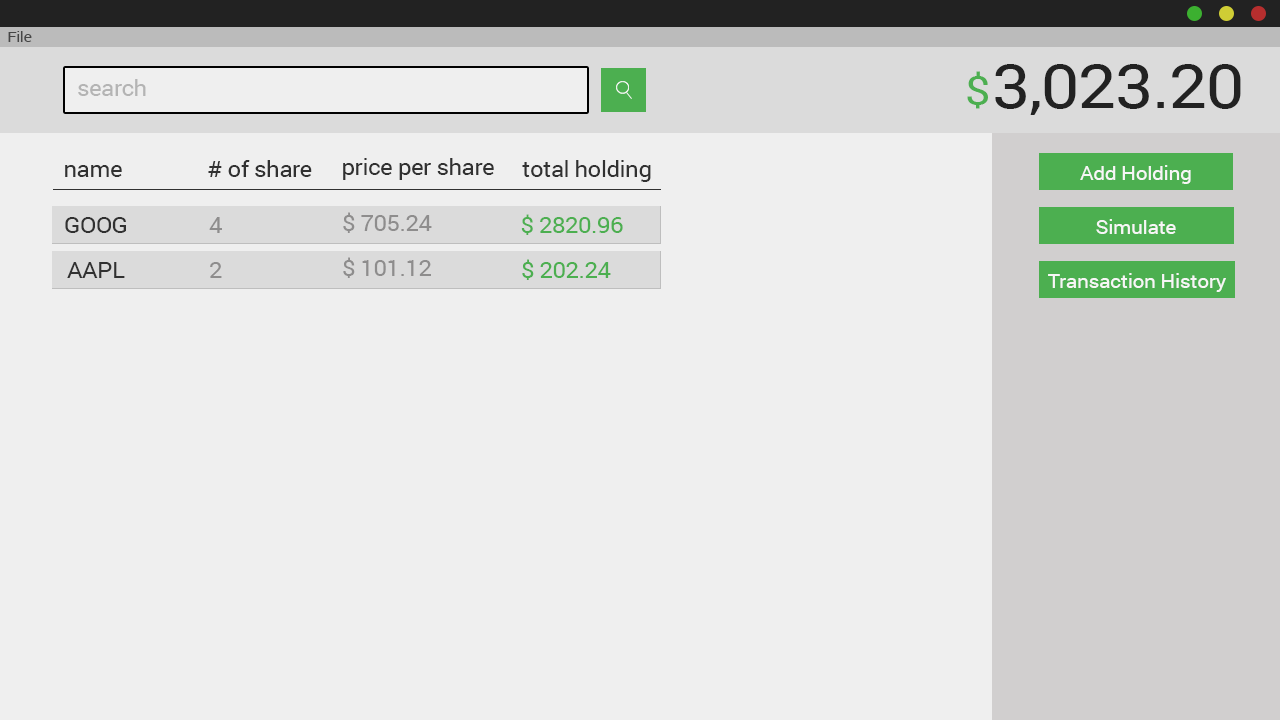
<style>
.page{position:relative;width:1280px;height:720px;background:#efefef}
.page>*{position:absolute;margin:0}
.t1{font:14.1px "Roboto-Regular";letter-spacing:-0.02em;color:#454545;scale:1.11 1}
.t2{font:61.4px "Roboto-Regular";letter-spacing:-0.02em;color:#222222;scale:1.11 1}
.t3{font:40.3px "Roboto-Regular";letter-spacing:-0.02em;color:#4caf50;scale:1.11 1}
.t4{font:21.6px "Roboto-Regular";letter-spacing:-0.02em;color:#b4b4b4;scale:1.11 1}
.t5{font:21.6px "Roboto-Regular";letter-spacing:-0.02em;color:#313131;scale:1.11 1}
.t6{font:18.9px "Roboto-Regular";letter-spacing:-0.02em;color:#f7f6f6;scale:1.11 1}
.t7{font:21.6px "Roboto-Regular";letter-spacing:-0.02em;color:#8e8d8d;scale:1.11 1}
.t8{font:21.6px "Roboto-Regular";letter-spacing:-0.02em;color:#4caf50;scale:1.11 1}
</style>
<div class="page">
<p class="t1" style="left:8px;top:31px;width:24px;height:11px">File</p>
<p class="t2" style="left:995px;top:64px;width:246px;height:51px">3,023.20</p>
<p class="t3" style="left:967px;top:71px;width:21px;height:38px">$</p>
<p class="t4" style="left:78px;top:79px;width:68px;height:17px">search</p>
<p class="t5" style="left:208px;top:160px;width:104px;height:17px"># of share</p>
<p class="t5" style="left:343px;top:158px;width:151px;height:22px">price per share</p>
<p class="t5" style="left:522px;top:160px;width:129px;height:22px">total holding</p>
<p class="t5" style="left:65px;top:165px;width:57px;height:12px">name</p>
<p class="t6" style="left:1080px;top:165px;width:111px;height:19px">Add Holding</p>
<p class="t5" style="left:65px;top:217px;width:61px;height:16px">GOOG</p>
<p class="t7" style="left:209px;top:217px;width:13px;height:16px">4</p>
<p class="t7" style="left:343px;top:212px;width:89px;height:21px">$ 705.24</p>
<p class="t8" style="left:521px;top:214px;width:102px;height:21px">$ 2820.96</p>
<p class="t6" style="left:1096px;top:219px;width:80px;height:15px">Simulate</p>
<p class="t7" style="left:343px;top:257px;width:88px;height:21px">$ 101.12</p>
<p class="t5" style="left:67px;top:262px;width:58px;height:16px">AAPL</p>
<p class="t7" style="left:210px;top:262px;width:12px;height:16px">2</p>
<p class="t8" style="left:522px;top:259px;width:89px;height:21px">$ 202.24</p>
<p class="t6" style="left:1048px;top:273px;width:178px;height:19px">Transaction History</p>
</div>
